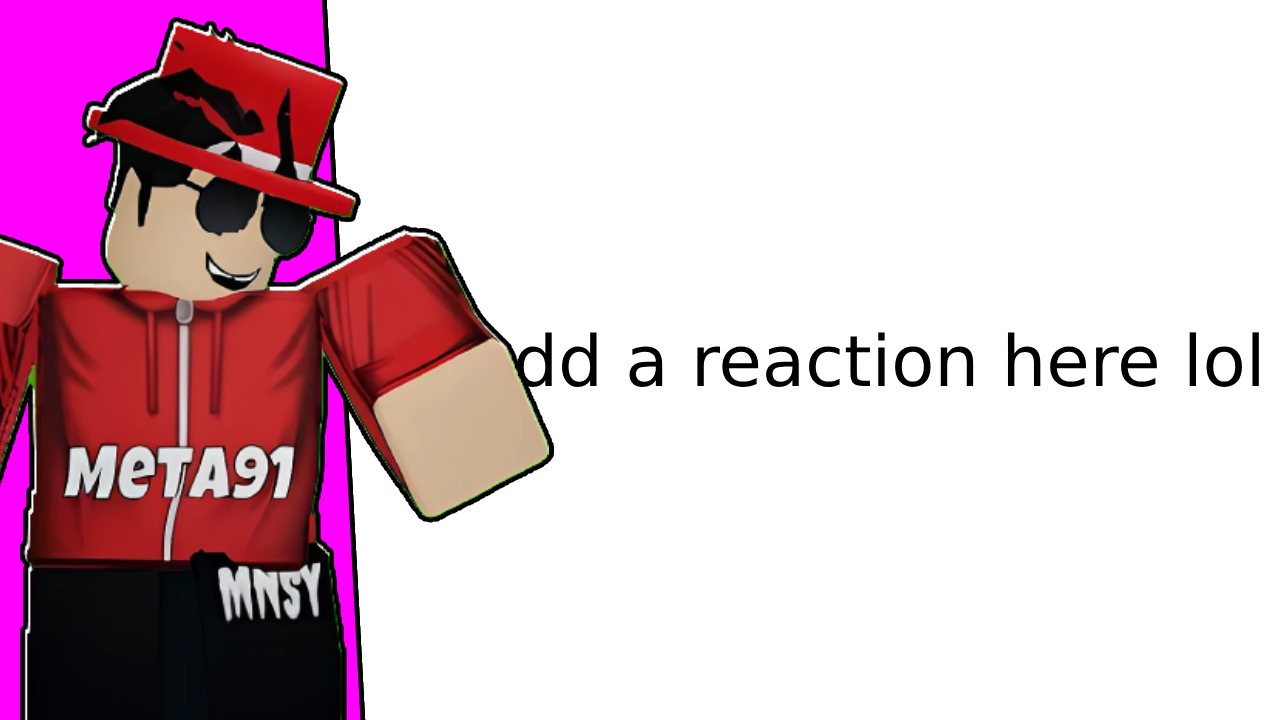
<style>
.page{position:relative;width:1280px;height:720px;background:#ffffff}
.page>*{position:absolute;margin:0}
.t1{font:70.6px "DejaVuSans";color:#000000}
</style>
<div class="page">
<p class="t1" style="left:474px;top:332px;width:785px;height:55px">add a reaction here lol</p>
</div>
